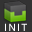
<style>
.page{position:relative;width:32px;height:32px;background:#333333}
.page>*{position:absolute;margin:0}
.t1{font:10px "ArialMT";letter-spacing:0.14em;color:#ffffff}
</style>
<div class="page">
<p class="t1" style="left:5px;top:23px;width:22px;height:8px">INIT</p>
</div>
